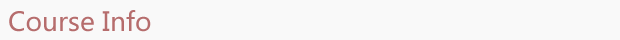
<style>
.page{position:relative;width:620px;height:40px;background:#f9f9f9}
.page>*{position:absolute;margin:0}
.t1{font:26px "MicrosoftYaHei";color:#b66d6d}
</style>
<div class="page">
<p class="t1" style="left:9px;top:10px;width:142px;height:22px">Course Info</p>
</div>
